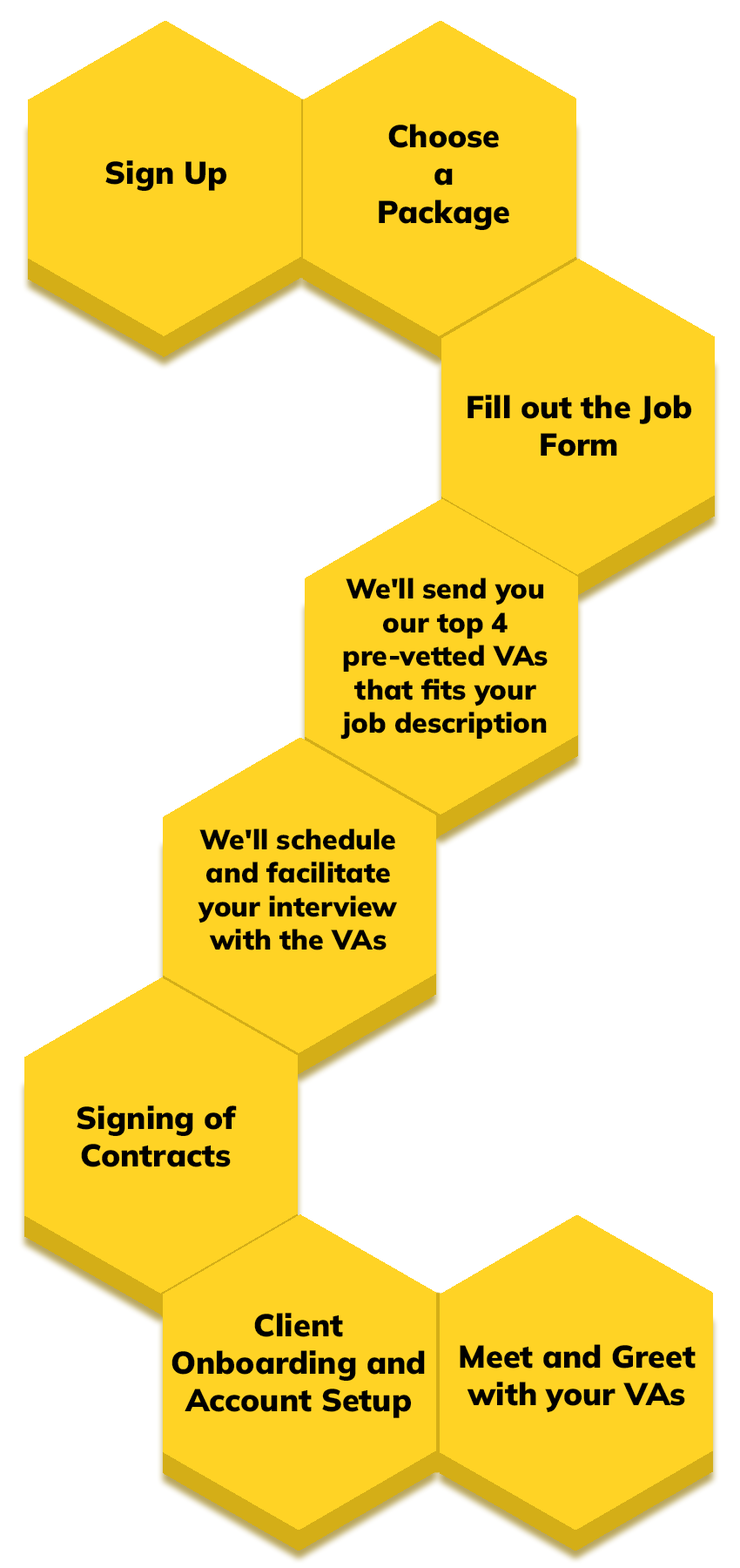
<style>
.page{position:relative;width:740px;height:1568px;background:#ffffff}
.page>*{position:absolute;margin:0}
.t1{font:31.4px "MulishRoman-Black";color:#000000}
.t2{font:27.9px "MulishRoman-Black";color:#000000}
</style>
<div class="page">
<p class="t1" style="left:379px;top:124px;width:131px;height:107px;text-align:center">Choose <br>a<br>Package</p>
<p class="t1" style="left:105px;top:160px;width:122px;height:32px">Sign Up</p>
<p class="t1" style="left:468px;top:395px;width:225px;height:61px;text-align:center">Fill out the Job Form</p>
<p class="t2" style="left:341px;top:578px;width:207px;height:162px;text-align:center">We'll send you our top 4 pre-vetted VAs that fits your job description</p>
<p class="t2" style="left:198px;top:828px;width:199px;height:122px;text-align:center">We'll schedule and facilitate your interview with the VAs</p>
<p class="t1" style="left:77px;top:1105px;width:160px;height:62px;text-align:center">Signing of Contracts</p>
<p class="t1" style="left:172px;top:1313px;width:253px;height:105px;text-align:center">Client Onboarding and Account Setup</p>
<p class="t1" style="left:460px;top:1344px;width:236px;height:69px;text-align:center">Meet and Greet with your VAs</p>
</div>
